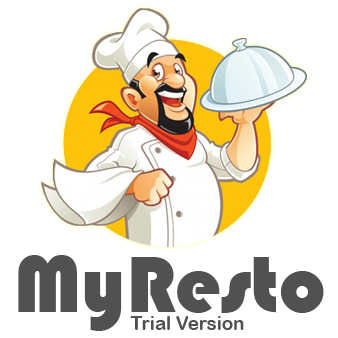
<style>
.page{position:relative;width:338px;height:338px;background:#ffffff}
.page>*{position:absolute;margin:0}
.t1{font:82.8px "Bauhaus93";color:#515152}
.t2{font:18.7px "ArialRoundedMTBold";color:#515152}
</style>
<div class="page">
<p class="t1" style="left:18px;top:255px;width:306px;height:76px">MyResto</p>
<p class="t2" style="left:130px;top:316px;width:114px;height:14px">Trial Version</p>
</div>
